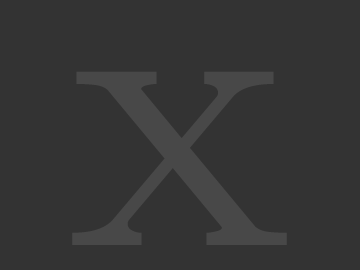
<style>
.page{position:relative;width:360px;height:270px;background:#333333}
.page>*{position:absolute;margin:0}
.t1{font:253.8px "Cmr5";color:#484848;text-transform:uppercase}
</style>
<div class="page">
<p class="t1" style="left:72px;top:71px;width:215px;height:174px">X</p>
</div>
